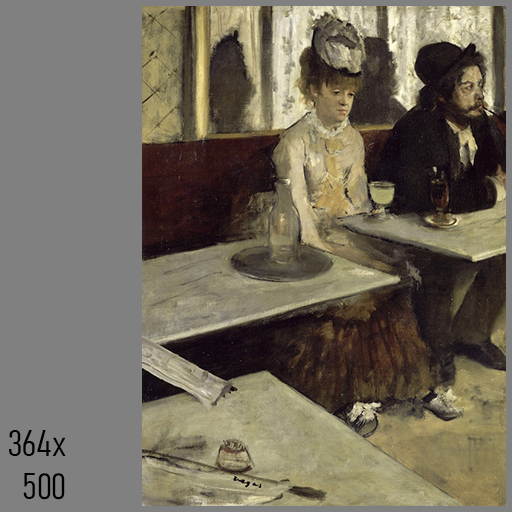
<style>
.page{position:relative;width:512px;height:512px;background:#808080}
.page>*{position:absolute;margin:0}
.t1{font:36px "Bahnschrift-LightCondensed";color:#000000}
</style>
<div class="page">
<p class="t1" style="left:9px;top:430px;width:57px;height:70px;text-align:right">364x<br>500</p>
</div>
